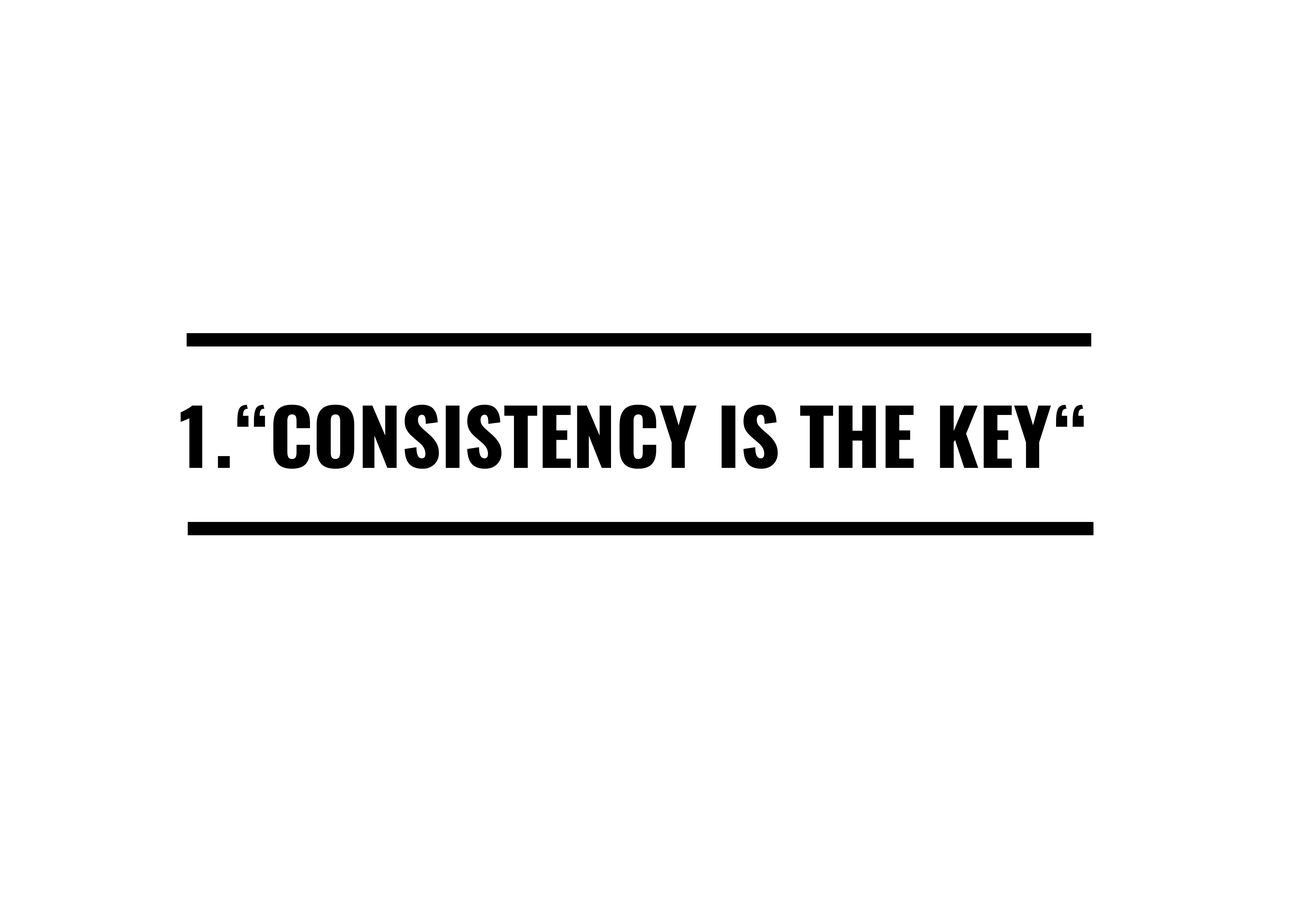
<style>
.page{position:relative;width:1299px;height:918px;background:#ffffff}
.page>*{position:absolute;margin:0}
.t1{font:77.1px "Oswald-Bold";color:#000000}
</style>
<div class="page">
<p class="t1" style="left:180px;top:405px;width:904px;height:64px">1.“CONSISTENCY IS THE KEY“</p>
</div>
